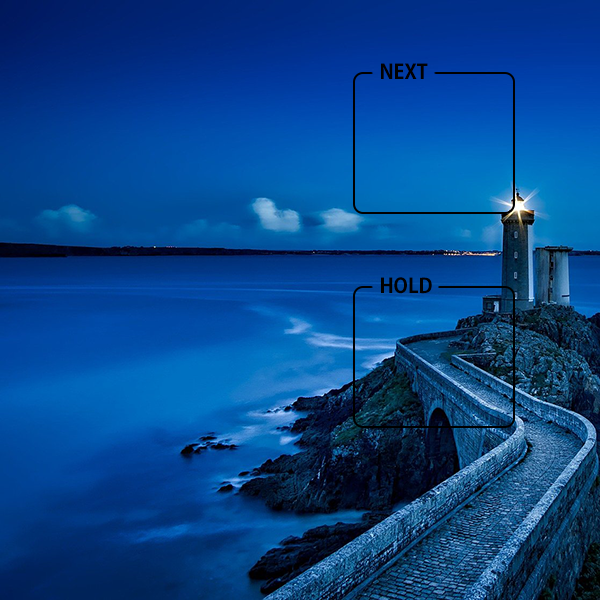
<style>
.page{position:relative;width:600px;height:600px}
.page>*{position:absolute;margin:0}
.t1{font:20px "AdobeGothicStd-Bold";color:#010101}
</style>
<div class="page">
<p class="t1" style="left:381px;top:63px;width:47px;height:16px">NEXT</p>
<p class="t1" style="left:381px;top:277px;width:51px;height:17px">HOLD</p>
</div>
